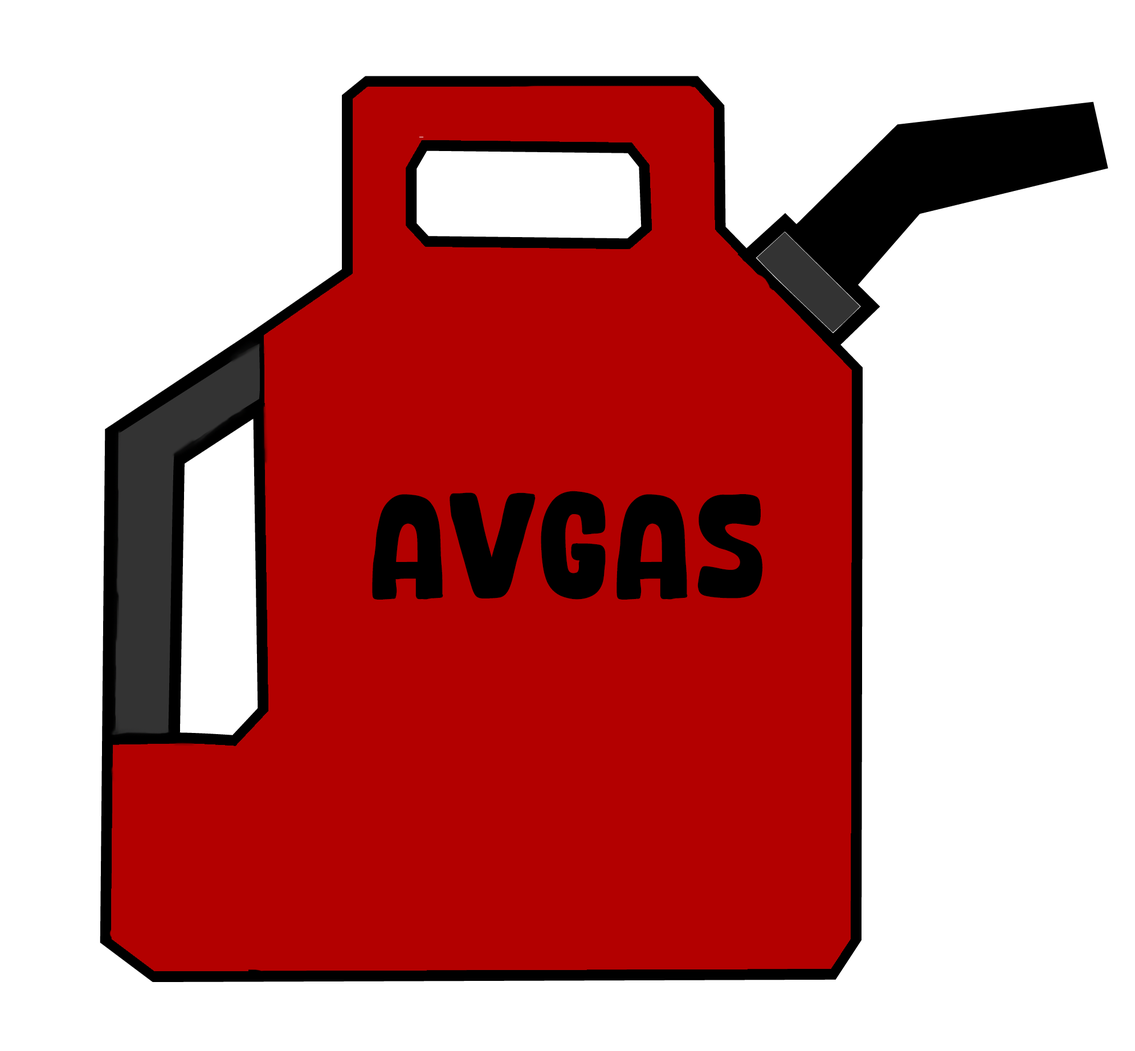
<style>
.page{position:relative;width:1135px;height:1051px;background:#ffffff}
.page>*{position:absolute;margin:0}
.t1{font:142.4px "Chatlong";color:#000000}
</style>
<div class="page">
<p class="t1" style="left:372px;top:491px;width:391px;height:108px">AVGAS</p>
</div>
